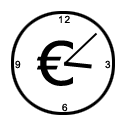
<style>
.page{position:relative;width:128px;height:128px;background:#ffffff}
.page>*{position:absolute;margin:0}
.t1{font:10px "ArialMT";letter-spacing:0.055em;color:#000000}
.t2{font:60px "Verdana";letter-spacing:0.055em;color:#000000}
</style>
<div class="page">
<p class="t1" style="left:59px;top:15px;width:11px;height:8px">12</p>
<p class="t2" style="left:37px;top:40px;width:36px;height:46px">€</p>
<p class="t1" style="left:15px;top:60px;width:6px;height:9px">9</p>
<p class="t1" style="left:105px;top:60px;width:6px;height:9px">3</p>
<p class="t1" style="left:62px;top:103px;width:6px;height:9px">6</p>
</div>
